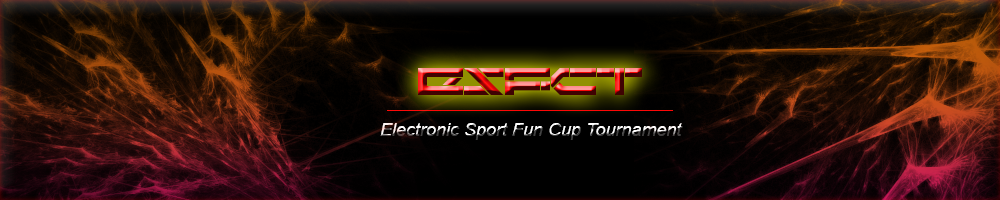
<style>
.page{position:relative;width:1000px;height:200px}
.page>*{position:absolute;margin:0}
.t1{font:36px "Darktech-LDR"}
.t2{font:18px "Arial-ItalicMT"}
</style>
<div class="page">
<p class="t1" style="left:418px;top:68px;width:224px;height:27px">ESFCT</p>
<p class="t2" style="left:380px;top:123px;width:303px;height:17px">Electronic Sport Fun Cup Tournament</p>
</div>
